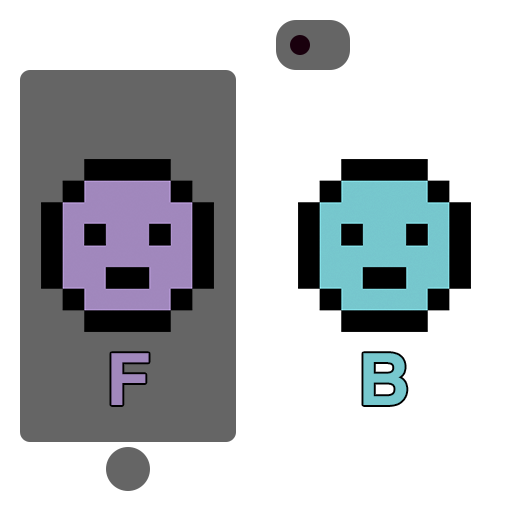
<style>
.page{position:relative;width:512px;height:512px;background:#ffffff}
.page>*{position:absolute;margin:0}
.t1{font:72px "Helvetica-Bold";color:#a188bd}
.t2{font:72px "Helvetica-Bold";color:#77c8ce}
</style>
<div class="page">
<p class="t1" style="left:111px;top:353px;width:38px;height:52px">F</p>
<p class="t2" style="left:363px;top:353px;width:44px;height:52px">B</p>
</div>
